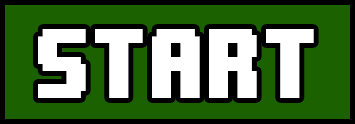
<style>
.page{position:relative;width:355px;height:124px;background:#1b6100}
.page>*{position:absolute;margin:0}
.t1{font:81.8px "8BITWONDERNominal";color:#ffffff;scale:0.7 1}
</style>
<div class="page">
<p class="t1" style="left:38px;top:29px;width:276px;height:69px">START</p>
</div>
